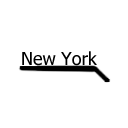
<style>
.page{position:relative;width:128px;height:128px;background:#ffffff}
.page>*{position:absolute;margin:0}
.t1{font:17.9px "Tahoma";color:#000000}
</style>
<div class="page">
<p class="t1" style="left:22px;top:51px;width:75px;height:15px">New York</p>
</div>
